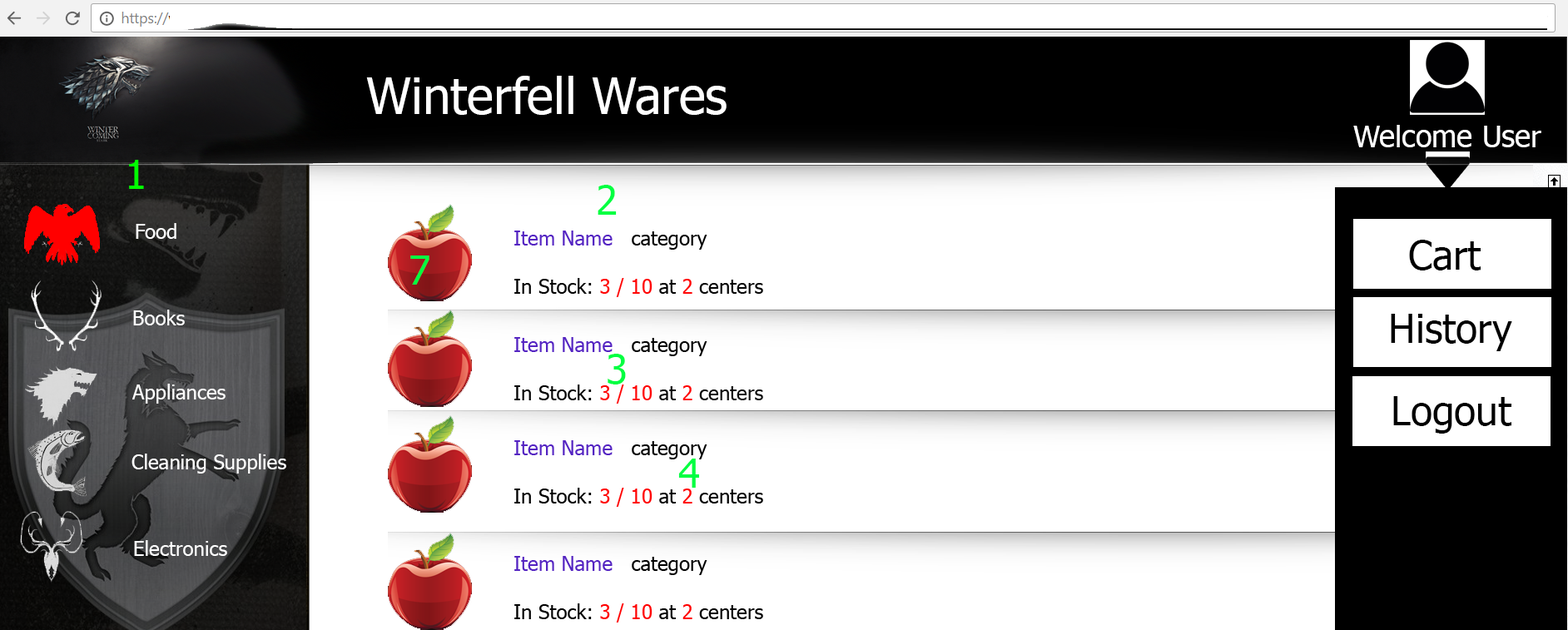
<style>
.page{position:relative;width:1568px;height:630px;background:#ffffff}
.page>*{position:absolute;margin:0}
.t1{font:49.9px "Tahoma";color:#ffffff}
.t2{font:30px "Tahoma";color:#ffffff}
.t3{font:39.9px "Tahoma";color:#00ff00}
.t4{font:39.9px "Tahoma";color:#00ff42}
.t5{font:20px "Tahoma";color:#ffffff}
.t6{font:39.9px "Tahoma";color:#000000}
</style>
<div class="page">
<p class="t1" style="left:366px;top:76px;width:361px;height:39px">Winterfell Wares</p>
<p class="t2" style="left:1353px;top:125px;width:188px;height:22px">Welcome User</p>
<p class="t3" style="left:129px;top:160px;width:15px;height:29px">1</p>
<p class="t4" style="left:598px;top:185px;width:19px;height:30px">2</p>
<p class="t5" style="left:136px;top:223px;width:40px;height:16px">Food</p>
<p class="t6" style="left:1409px;top:240px;width:72px;height:30px">Cart</p>
<p class="t4" style="left:410px;top:256px;width:19px;height:29px">7</p>
<p class="t5" style="left:133px;top:310px;width:52px;height:15px">Books</p>
<p class="t6" style="left:1391px;top:314px;width:121px;height:37px">History</p>
<p class="t4" style="left:608px;top:354px;width:18px;height:31px">3</p>
<p class="t5" style="left:132px;top:384px;width:94px;height:20px">Appliances</p>
<p class="t6" style="left:1393px;top:396px;width:118px;height:38px">Logout</p>
<p class="t5" style="left:131px;top:454px;width:155px;height:20px">Cleaning Supplies</p>
<p class="t4" style="left:678px;top:459px;width:21px;height:29px">4</p>
<p class="t5" style="left:134px;top:540px;width:93px;height:16px">Electronics</p>
</div>
